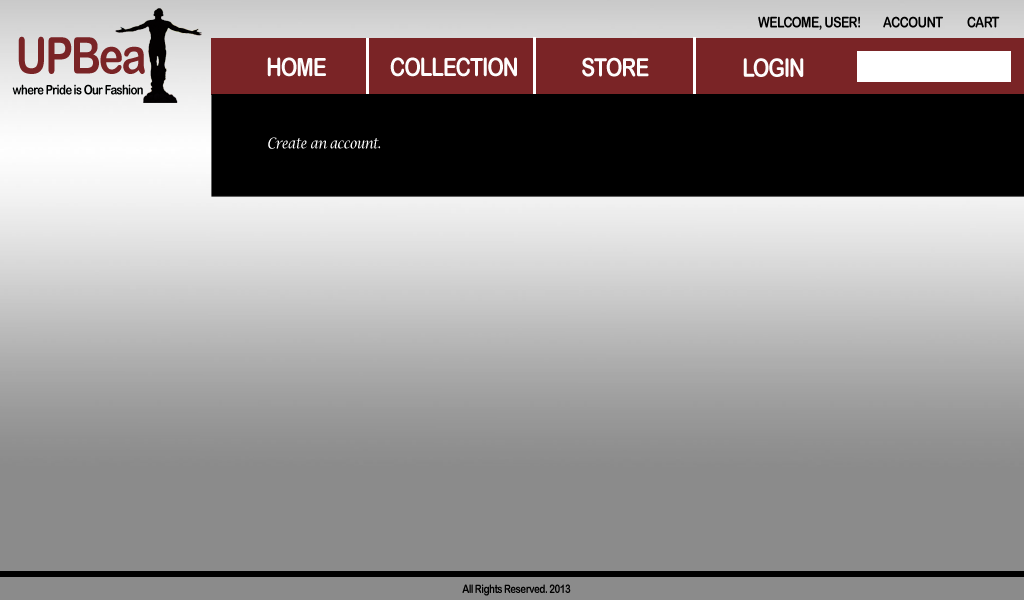
<style>
.page{position:relative;width:1024px;height:600px;background:#8b8b8b}
.page>*{position:absolute;margin:0}
.t1{font:15.1px "ArialRoundedMTBold";letter-spacing:-0.055em;color:#000000;scale:0.83 1}
.t2{font:50.4px "ArialRoundedMTBold";letter-spacing:-0.055em;color:#7a2426;scale:0.83 1}
.t3{font:25.2px "ArialRoundedMTBold";letter-spacing:-0.055em;color:#fefdfd;scale:0.83 1}
.t4{font:13.4px "ArialRoundedMTBold";letter-spacing:-0.055em;color:#000202;scale:0.83 1}
.t5{font:15.1px "LucidaCalligraphy-Italic";letter-spacing:-0.055em;color:#ffffff;scale:0.83 1}
.t6{font:11.8px "ArialRoundedMTBold";letter-spacing:-0.055em;color:#000000;scale:0.83 1}
</style>
<div class="page">
<p class="t1" style="left:758px;top:16px;width:102px;height:14px">WELCOME, USER!</p>
<p class="t1" style="left:883px;top:16px;width:60px;height:12px">ACCOUNT</p>
<p class="t1" style="left:967px;top:16px;width:33px;height:12px">CART</p>
<p class="t2" style="left:18px;top:36px;width:127px;height:38px">UPBea</p>
<p class="t3" style="left:267px;top:57px;width:59px;height:20px">HOME</p>
<p class="t3" style="left:390px;top:57px;width:127px;height:20px">COLLECTION</p>
<p class="t3" style="left:582px;top:57px;width:67px;height:20px">STORE</p>
<p class="t3" style="left:743px;top:58px;width:61px;height:19px">LOGIN</p>
<p class="t4" style="left:12px;top:84px;width:131px;height:11px">where Pride is Our Fashion</p>
<p class="t5" style="left:268px;top:137px;width:113px;height:12px">Create an account.</p>
<p class="t6" style="left:462px;top:584px;width:109px;height:12px">All Rights Reserved. 2013</p>
</div>
